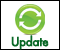
<style>
.page{position:relative;width:60px;height:50px;background:#ffffff}
.page>*{position:absolute;margin:0}
.t1{font:17px "PSLxKittithada-Bold";color:#086725;font-weight:bold}
</style>
<div class="page">
<p class="t1" style="left:11px;top:35px;width:38px;height:15px">Update</p>
</div>
